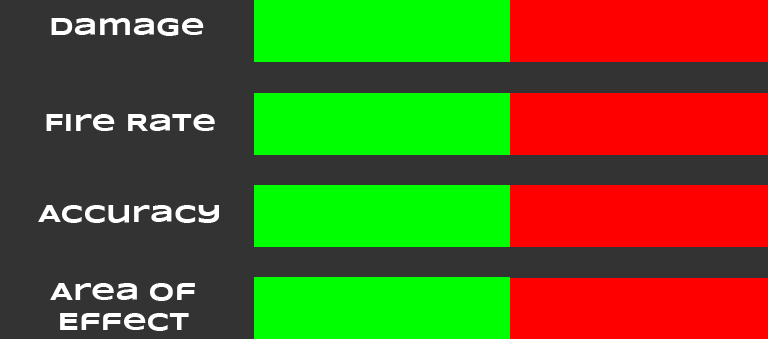
<style>
.page{position:relative;width:768px;height:339px;background:#333333}
.page>*{position:absolute;margin:0}
.t1{font:25px "Syncopate-Bold";color:#ffffff}
</style>
<div class="page">
<p class="t1" style="left:51px;top:18px;width:153px;height:18px">Damage</p>
<p class="t1" style="left:46px;top:114px;width:169px;height:17px">Fire Rate</p>
<p class="t1" style="left:38px;top:205px;width:181px;height:18px">Accuracy</p>
<p class="t1" style="left:50px;top:283px;width:145px;height:48px;text-align:center">Area of Effect</p>
</div>
